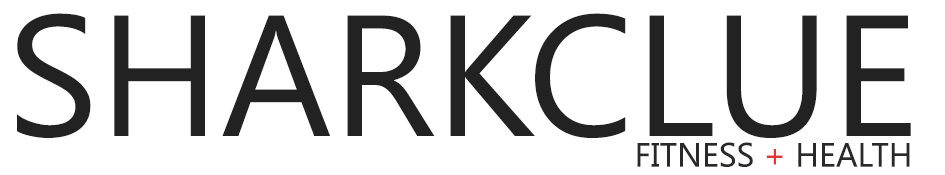
<style>
.page{position:relative;width:945px;height:175px;background:#ffffff}
.page>*{position:absolute;margin:0}
.t1{font:171.7px "SegoeUI";color:#222222}
.t2{font:33.6px "SegoeUI";color:#292929}
.t3{font:33.6px "SegoeUI";color:#e33636}
</style>
<div class="page">
<p class="t1" style="left:17px;top:13px;width:894px;height:125px">SHARKCLUE</p>
<p class="t2" style="left:637px;top:142px;width:273px;height:25px">FITNESS <span class="t3">+</span> HEALTH</p>
</div>
